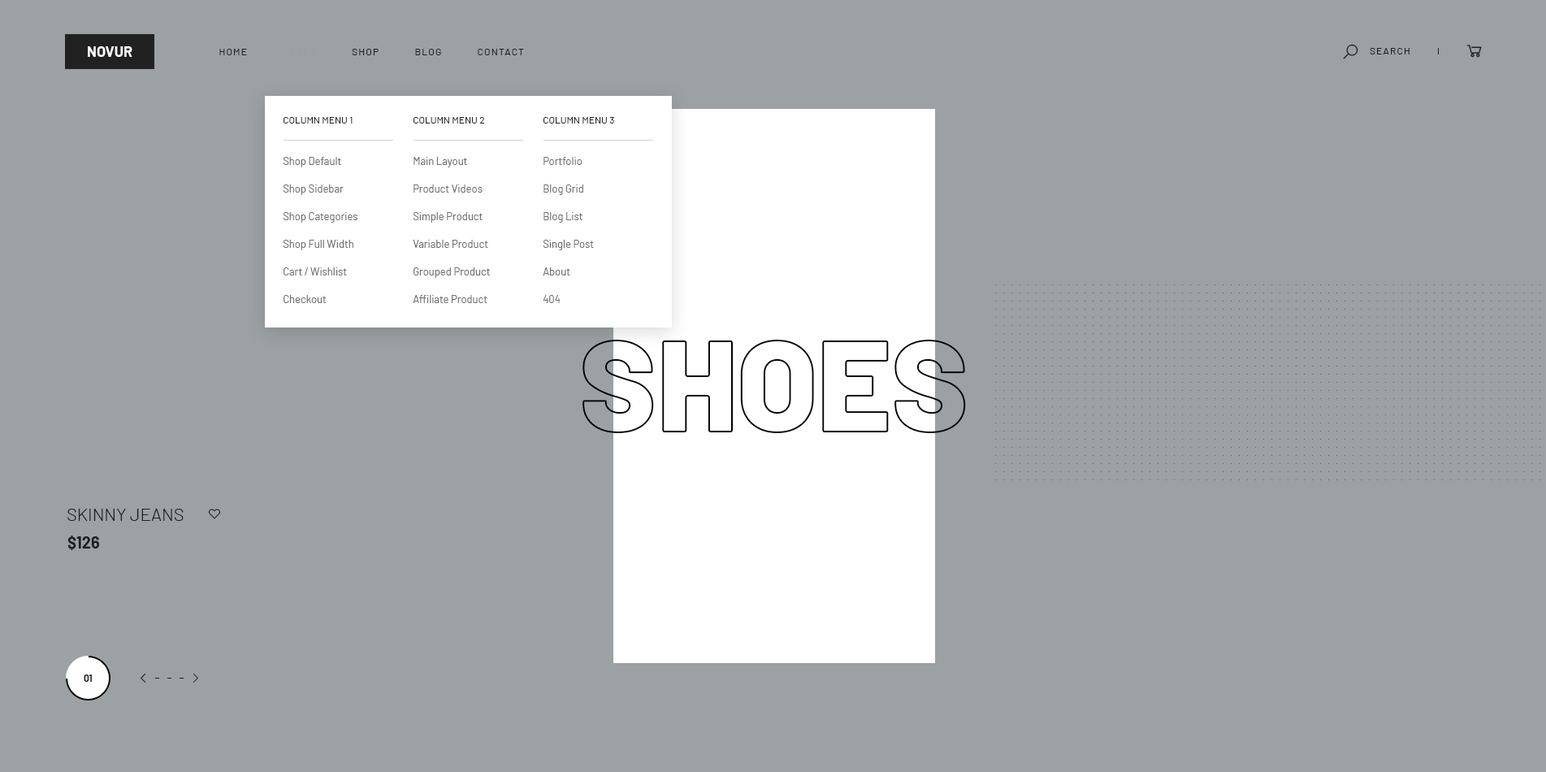
<style>
.page{position:relative;width:1546px;height:772px;background:#9ca1a3}
.page>*{position:absolute;margin:0}
.t1{font:14.6px "Barlow-Bold";color:#fefefe;text-transform:uppercase}
.t2{font:9.7px "Barlow-Regular";letter-spacing:0.1em;color:#1e2124;text-transform:uppercase}
.t3{font:9.7px "Barlow-Regular";letter-spacing:0.1em;color:#9e9d9d;text-transform:uppercase}
.t4{font:9.7px "Barlow-Regular";color:#1e2124;text-transform:uppercase}
.t5{font:10.6px/27.6px "Barlow-Regular";color:#6e7071}
.t6{font:17.9px "Barlow-Light";color:#1e2124;text-transform:uppercase}
.t7{font:16.2px "Barlow-Bold";color:#1e2124}
.t8{font:9.7px "Barlow-Bold";color:#1e2124;text-transform:uppercase}
</style>
<div class="page">
<p class="t1" style="left:88px;top:46px;width:44px;height:11px">novur</p>
<p class="t2" style="left:219px;top:49px;width:305px;height:6px">Home            <span class="t3">Pages</span>            Shop            Blog            Contact</p>
<p class="t2" style="left:1369px;top:48px;width:40px;height:6px">Search</p>
<p class="t4" style="left:283px;top:117px;width:69px;height:6px">Column Menu 1</p>
<p class="t4" style="left:413px;top:117px;width:72px;height:6px">Column Menu 2</p>
<p class="t4" style="left:543px;top:117px;width:71px;height:6px">Column Menu 3</p>
<p class="t5" style="left:283px;top:157px;width:74px;height:146px">Shop Default<br>Shop Sidebar<br>Shop Categories<br>Shop Full Width<br>Cart / Wishlist<br>Checkout</p>
<p class="t5" style="left:413px;top:157px;width:77px;height:146px">Main Layout<br>Product Videos<br>Simple Product<br>Variable Product<br>Grouped Product<br>Affiliate Product</p>
<p class="t5" style="left:543px;top:157px;width:51px;height:146px">Portfolio<br>Blog Grid<br>Blog List<br>Single Post<br>About<br>404</p>
<p class="t6" style="left:67px;top:508px;width:117px;height:13px">SKINNY JEANS</p>
<p class="t7" style="left:67px;top:535px;width:33px;height:15px">$126</p>
<p class="t8" style="left:84px;top:674px;width:8px;height:7px">01</p>
</div>
